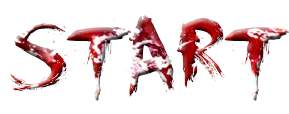
<style>
.page{position:relative;width:289px;height:114px;background:#ffffff}
.page>*{position:absolute;margin:0}
.t1{font:120px "DKFaceYourFears"}
</style>
<div class="page">
<p class="t1" style="left:10px;top:14px;width:279px;height:87px">Start</p>
<p class="t1" style="left:10px;top:14px;width:279px;height:87px">Start</p>
</div>
